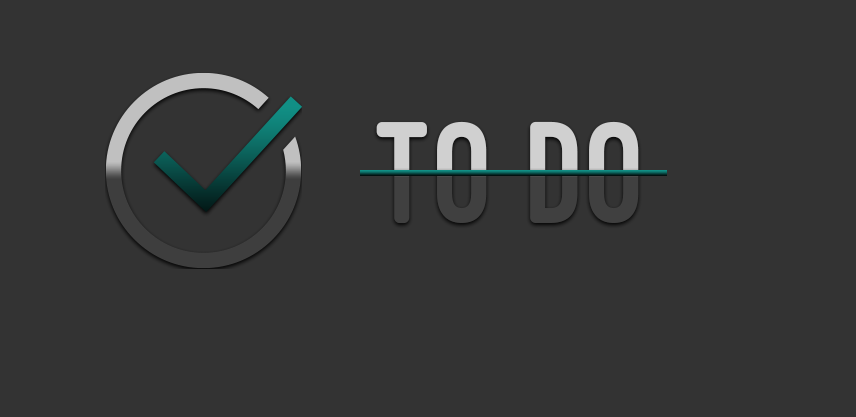
<style>
.page{position:relative;width:856px;height:417px;background:#333333}
.page>*{position:absolute;margin:0}
.t1{font:150px "OstrichSans-Heavy"}
</style>
<div class="page">
<p class="t1" style="left:376px;top:121px;width:263px;height:103px">TO DO</p>
</div>
